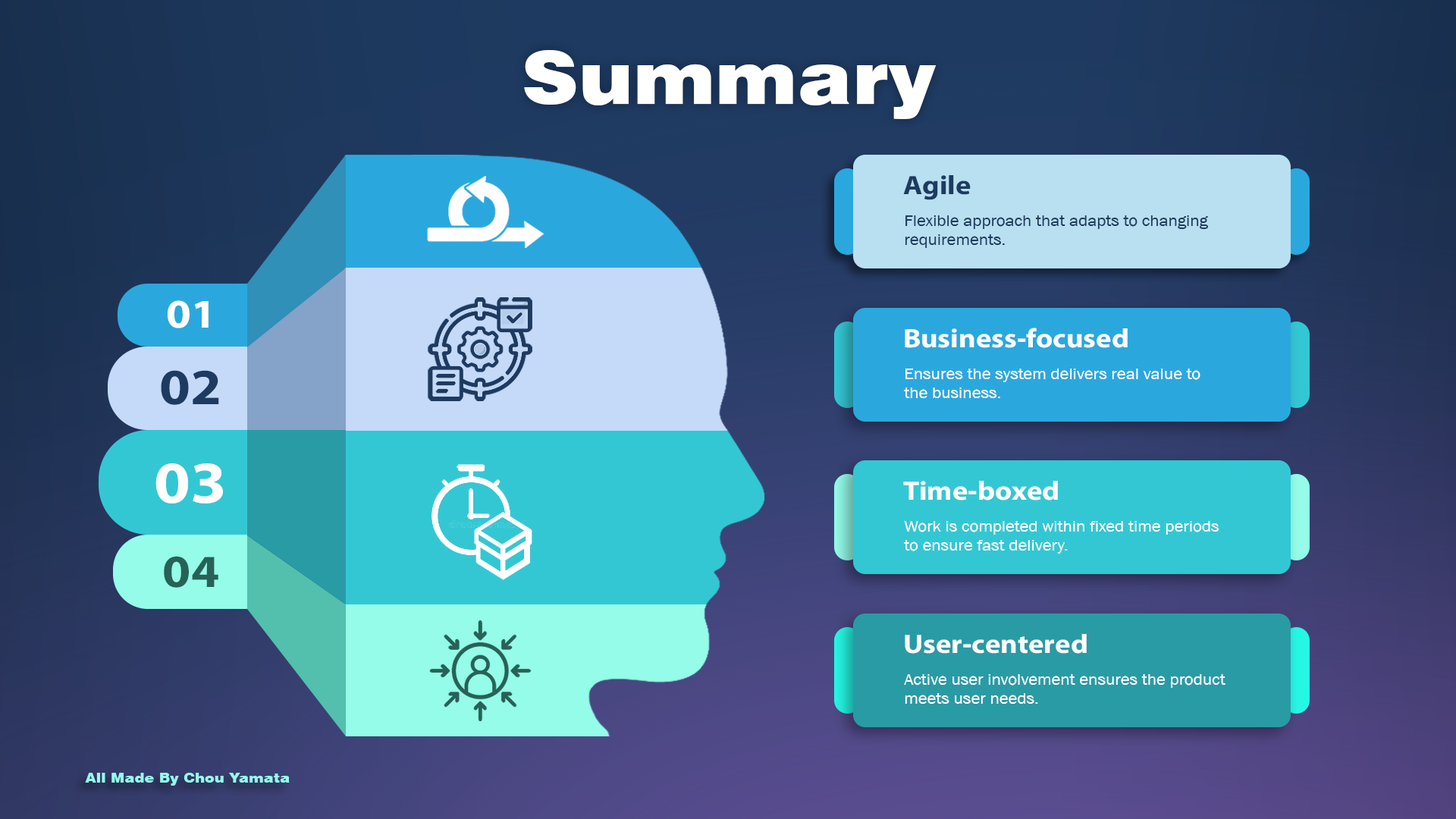
<style>
.page{position:relative;width:1456px;height:819px}
.page>*{position:absolute;margin:0}
.t1{font:72.6px "Swiss721BT-Black";color:#ffffff;scale:1.1 1}
.t2{font:26.8px "iKampuchea001_O'Chrov";color:#1e3a60;scale:1.1 1}
.t3{font:15.7px "AA-Khmer-AngDaunPov";color:#1e3a60;scale:1.1 1}
.t4{font:40.8px "iKampuchea001_O'Chrov";color:#ffffff;scale:1.1 1}
.t5{font:26.8px "iKampuchea001_O'Chrov";color:#ffffff;scale:1.1 1}
.t6{font:50.8px "iKampuchea001_O'Chrov";color:#1e3a60;scale:1.1 1}
.t7{font:15.7px "AA-Khmer-AngDaunPov";color:#ffffff;scale:1.1 1}
.t8{font:59.6px "iKampuchea001_O'Chrov";color:#ffffff;scale:1.1 1}
.t9{font:46.1px "iKampuchea001_O'Chrov";color:#276157;scale:1.1 1}
.t10{font:13.3px "Swiss721BT-Black";color:#94fce9;scale:1.1 1}
</style>
<div class="page">
<p class="t1" style="left:524px;top:50px;width:413px;height:69px">Summary</p>
<p class="t2" style="left:903px;top:175px;width:68px;height:25px">Agile</p>
<p class="t3" style="left:905px;top:215px;width:304px;height:33px">Flexible approach that adapts to changing <br>requirements.</p>
<p class="t4" style="left:168px;top:300px;width:41px;height:28px">01</p>
<p class="t5" style="left:905px;top:328px;width:223px;height:20px">Business-focused</p>
<p class="t6" style="left:161px;top:370px;width:58px;height:35px">02</p>
<p class="t7" style="left:904px;top:369px;width:296px;height:29px">Ensures the system delivers real value to <br>the business.</p>
<p class="t8" style="left:155px;top:463px;width:68px;height:41px">03</p>
<p class="t5" style="left:903px;top:481px;width:155px;height:19px">Time-boxed</p>
<p class="t7" style="left:904px;top:521px;width:315px;height:33px">Work is completed within fixed time periods <br>to ensure fast delivery.</p>
<p class="t9" style="left:164px;top:556px;width:54px;height:32px">04</p>
<p class="t5" style="left:905px;top:634px;width:182px;height:20px">User-centered</p>
<p class="t7" style="left:904px;top:674px;width:321px;height:30px">Active user involvement ensures the product <br>meets user needs.</p>
<p class="t10" style="left:85px;top:773px;width:205px;height:13px">All Made By Chou Yamata</p>
</div>
